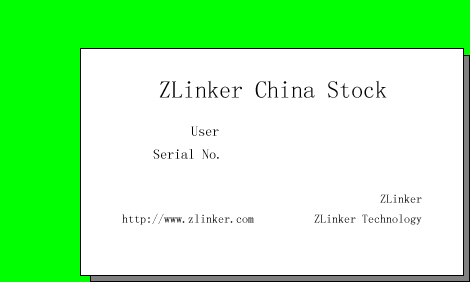
<style>
.page{position:relative;width:470px;height:282px;background:#ffffff}
.page>*{position:absolute;margin:0}
.t1{font:24px "SimSun";color:#000000}
.t2{font:14px "SimSun";color:#000000}
.t3{font:12px "SimSun";color:#000000}
.t4{font:12px "SimSun"}
</style>
<div class="page">
<p class="t1" style="left:159px;top:80px;width:228px;height:18px">ZLinker China Stock</p>
<p class="t2" style="left:191px;top:126px;width:28px;height:10px">User</p>
<p class="t2" style="left:153px;top:149px;width:66px;height:10px">Serial No.</p>
<p class="t3" style="left:380px;top:194px;width:42px;height:9px">ZLinker</p>
<p class="t4" style="left:122px;top:213px;width:300px;height:12px">http://www.zlinker.com          ZLinker Technology</p>
</div>
